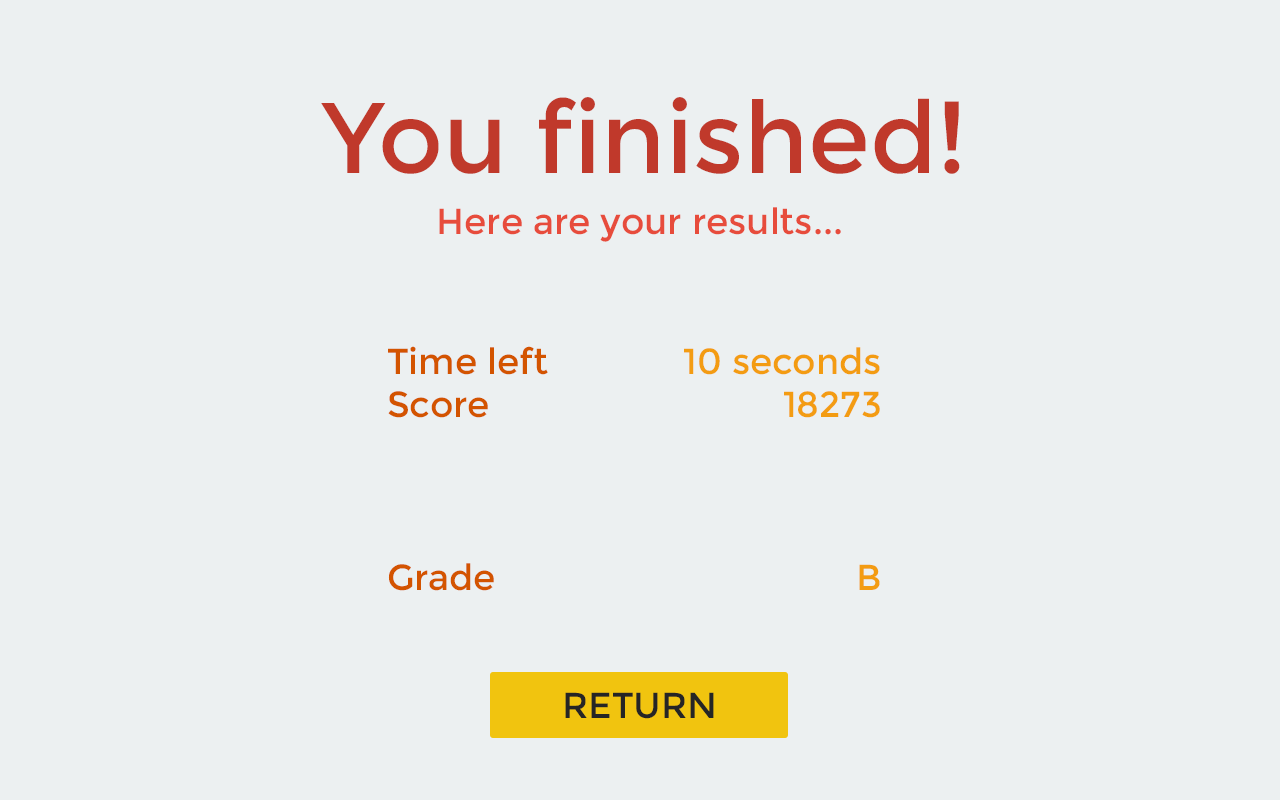
<style>
.page{position:relative;width:1280px;height:800px;background:#ecf0f1}
.page>*{position:absolute;margin:0}
.t1{font:100px "Montserrat-Regular";color:#c0392b}
.t2{font:36px "Montserrat-Regular";color:#e74c3c}
.t3{font:36px "Montserrat-Regular";color:#d35400}
.t4{font:36px "Montserrat-Regular";color:#f39c12}
.t5{font:36px "Montserrat-Regular";color:#252525}
</style>
<div class="page">
<p class="t1" style="left:321px;top:97px;width:639px;height:77px">You finished!</p>
<p class="t2" style="left:439px;top:207px;width:402px;height:35px">Here are your results...</p>
<p class="t3" style="left:388px;top:346px;width:160px;height:245px">Time left<br>Score<br><br><br><br>Grade</p>
<p class="t4" style="left:684px;top:347px;width:196px;height:243px;text-align:right">10 seconds<br>18273<br><br><br><br>B</p>
<p class="t5" style="left:565px;top:692px;width:149px;height:27px">RETURN</p>
</div>
